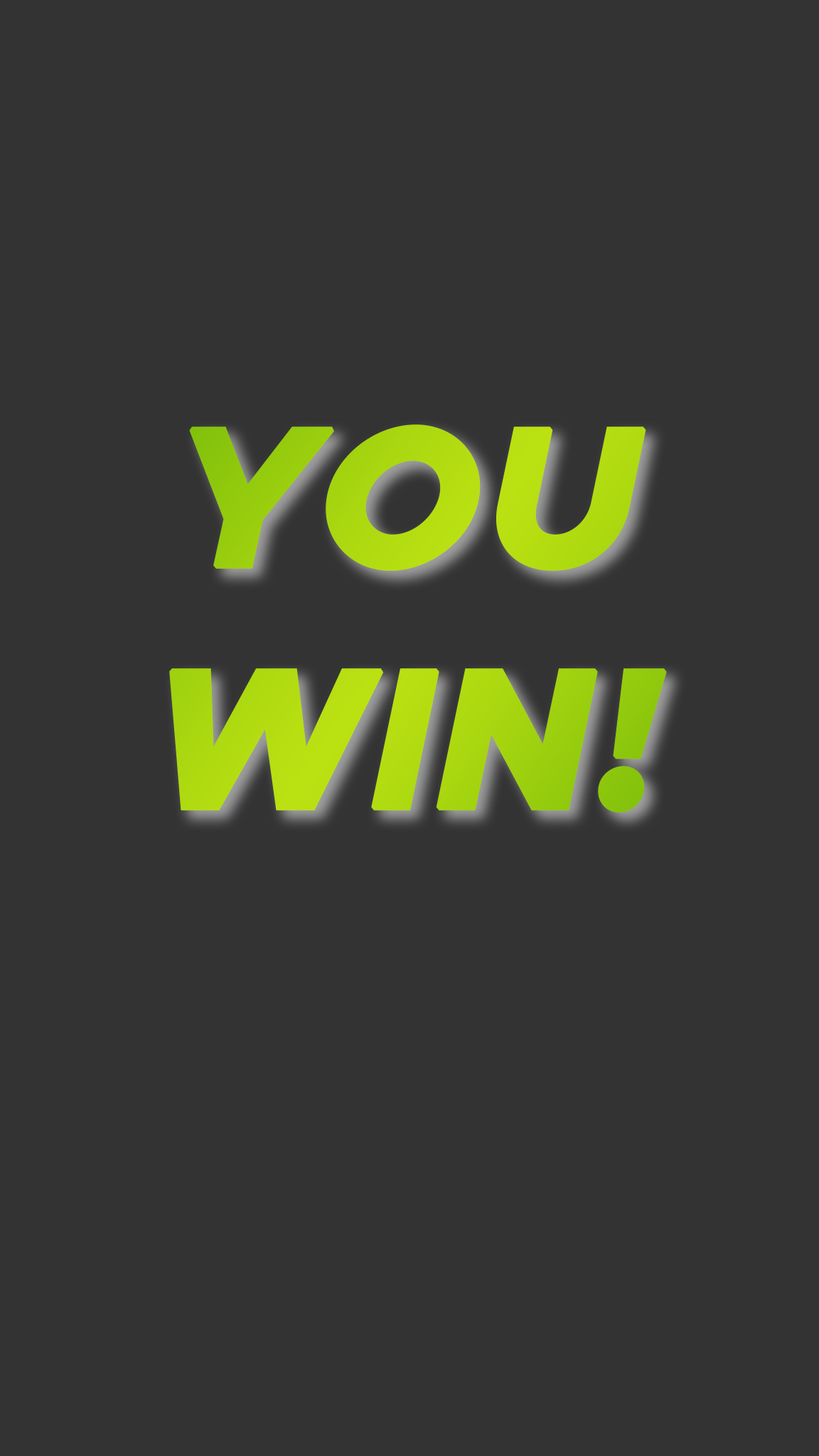
<style>
.page{position:relative;width:819px;height:1456px;background:#333333}
.page>*{position:absolute;margin:0}
.t1{font:199.1px/241.7px "Metropolis-ExtraBoldItalic";color:#add910;font-weight:bold}
</style>
<div class="page">
<p class="t1" style="left:169px;top:424px;width:498px;height:389px;text-align:center">YOU<br>WIN!</p>
</div>
